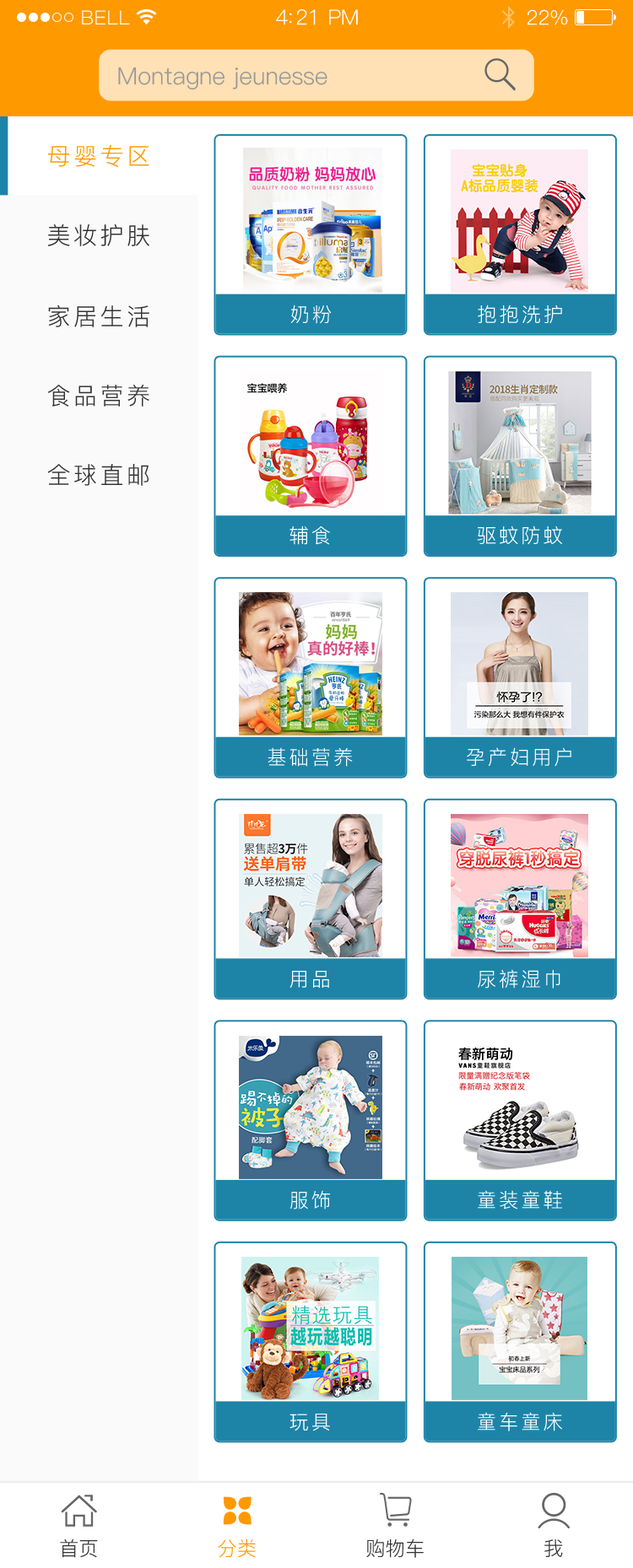
<style>
.page{position:relative;width:633px;height:1568px;background:#ffffff}
.page>*{position:absolute;margin:0}
.t1{font:19.4px "PingFang-SC-Regular";letter-spacing:0.02em;color:#ffffff}
.t2{font:21.1px "PingFang-SC-Regular";letter-spacing:-0.02em;color:#ffffff}
.t3{font:20.2px "PingFang-SC-Regular";letter-spacing:-0.02em;color:#ffffff}
.t4{font:23.7px "PingFang-SC-Regular";color:#999999}
.t5{font:23.7px "PingFang-SC-Regular";letter-spacing:0.12em;color:#ff9900}
.t6{font:23.7px "PingFang-SC-Regular";letter-spacing:0.12em;color:#333333}
.t7{font:19.8px "PingFang-SC-Regular";letter-spacing:0.12em;color:#ffffff}
.t8{font:19.8px "PingFang-SC-Regular";color:#333333}
.t9{font:19.8px "PingFang-SC-Regular";color:#ff9900}
</style>
<div class="page">
<p class="t1" style="left:82px;top:10px;width:48px;height:14px">BELL</p>
<p class="t2" style="left:276px;top:9px;width:82px;height:16px">4:21 PM</p>
<p class="t3" style="left:527px;top:9px;width:41px;height:16px">22%</p>
<p class="t4" style="left:118px;top:67px;width:209px;height:23px">Montagne jeunesse</p>
<p class="t5" style="left:48px;top:145px;width:101px;height:22px">母婴专区</p>
<p class="t6" style="left:47px;top:224px;width:102px;height:22px">美妆护肤</p>
<p class="t6" style="left:48px;top:305px;width:101px;height:22px">家居生活</p>
<p class="t7" style="left:290px;top:304px;width:41px;height:20px">奶粉</p>
<p class="t7" style="left:477px;top:304px;width:85px;height:20px">抱抱洗护</p>
<p class="t6" style="left:47px;top:385px;width:102px;height:22px">食品营养</p>
<p class="t6" style="left:47px;top:464px;width:101px;height:22px">全球直邮</p>
<p class="t7" style="left:289px;top:526px;width:41px;height:19px">辅食</p>
<p class="t7" style="left:477px;top:525px;width:85px;height:20px">驱蚊防蚊</p>
<p class="t7" style="left:267px;top:747px;width:86px;height:20px">基础营养</p>
<p class="t7" style="left:466px;top:747px;width:105px;height:20px">孕产妇用户</p>
<p class="t7" style="left:289px;top:971px;width:40px;height:17px">用品</p>
<p class="t7" style="left:477px;top:969px;width:83px;height:20px">尿裤湿巾</p>
<p class="t7" style="left:290px;top:1190px;width:40px;height:20px">服饰</p>
<p class="t7" style="left:477px;top:1190px;width:85px;height:20px">童装童鞋</p>
<p class="t7" style="left:289px;top:1414px;width:41px;height:17px">玩具</p>
<p class="t7" style="left:477px;top:1412px;width:85px;height:19px">童车童床</p>
<p class="t8" style="left:60px;top:1538px;width:38px;height:20px">首页</p>
<p class="t9" style="left:218px;top:1538px;width:38px;height:20px">分类</p>
<p class="t8" style="left:366px;top:1538px;width:57px;height:20px">购物车</p>
<p class="t8" style="left:544px;top:1539px;width:19px;height:18px">我</p>
</div>
